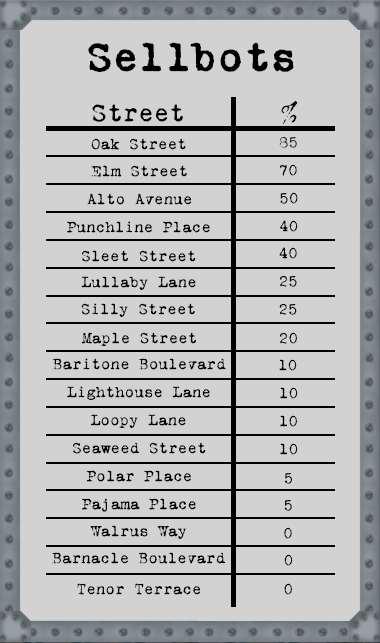
<style>
.page{position:relative;width:380px;height:643px;background:#d2d2d2}
.page>*{position:absolute;margin:0}
.t1{font:42px "VTPortableRemington";color:#000000;font-weight:bold}
.t2{font:26px "VTPortableRemington";color:#000000}
.t3{font:16px "VTPortableRemington";color:#292929}
.t4{font:16px "VTPortableRemington";color:#000000}
</style>
<div class="page">
<p class="t1" style="left:88px;top:42px;width:206px;height:30px">Sellbots</p>
<p class="t2" style="left:281px;top:101px;width:16px;height:23px">%</p>
<p class="t2" style="left:92px;top:104px;width:91px;height:18px">Street</p>
<p class="t3" style="left:279px;top:137px;width:18px;height:11px">85</p>
<p class="t4" style="left:91px;top:138px;width:95px;height:12px">Oak Street</p>
<p class="t4" style="left:91px;top:165px;width:96px;height:12px">Elm Street</p>
<p class="t4" style="left:280px;top:164px;width:17px;height:12px">70</p>
<p class="t4" style="left:87px;top:193px;width:105px;height:12px">Alto Avenue</p>
<p class="t4" style="left:280px;top:192px;width:18px;height:12px">50</p>
<p class="t4" style="left:67px;top:221px;width:143px;height:12px">Punchline Place</p>
<p class="t4" style="left:280px;top:220px;width:18px;height:12px">40</p>
<p class="t4" style="left:82px;top:250px;width:114px;height:12px">Sleet Street</p>
<p class="t4" style="left:279px;top:247px;width:18px;height:12px">40</p>
<p class="t4" style="left:81px;top:276px;width:115px;height:14px">Lullaby Lane</p>
<p class="t4" style="left:280px;top:276px;width:17px;height:11px">25</p>
<p class="t4" style="left:81px;top:303px;width:114px;height:14px">Silly Street</p>
<p class="t4" style="left:279px;top:304px;width:18px;height:11px">25</p>
<p class="t4" style="left:81px;top:332px;width:115px;height:14px">Maple Street</p>
<p class="t4" style="left:280px;top:332px;width:17px;height:12px">20</p>
<p class="t4" style="left:52px;top:358px;width:174px;height:12px">Baritone Boulevard</p>
<p class="t4" style="left:279px;top:359px;width:18px;height:12px">10</p>
<p class="t4" style="left:67px;top:386px;width:143px;height:14px">Lighthouse Lane</p>
<p class="t4" style="left:280px;top:387px;width:18px;height:12px">10</p>
<p class="t4" style="left:91px;top:414px;width:95px;height:14px">Loopy Lane</p>
<p class="t4" style="left:280px;top:415px;width:17px;height:12px">10</p>
<p class="t4" style="left:73px;top:442px;width:133px;height:12px">Seaweed Street</p>
<p class="t4" style="left:280px;top:443px;width:18px;height:12px">10</p>
<p class="t4" style="left:86px;top:470px;width:105px;height:12px">Polar Place</p>
<p class="t4" style="left:285px;top:473px;width:8px;height:11px">5</p>
<p class="t4" style="left:82px;top:498px;width:114px;height:14px">Pajama Place</p>
<p class="t4" style="left:284px;top:500px;width:8px;height:11px">5</p>
<p class="t4" style="left:90px;top:525px;width:97px;height:14px">Walrus Way</p>
<p class="t4" style="left:284px;top:527px;width:8px;height:12px">0</p>
<p class="t4" style="left:52px;top:552px;width:174px;height:12px">Barnacle Boulevard</p>
<p class="t4" style="left:284px;top:554px;width:9px;height:12px">0</p>
<p class="t4" style="left:77px;top:583px;width:124px;height:12px">Tenor Terrace</p>
<p class="t4" style="left:284px;top:583px;width:8px;height:12px">0</p>
</div>
